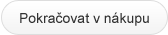
<style>
.page{position:relative;width:168px;height:35px}
.page>*{position:absolute;margin:0}
.t1{font:14px "ArialMT";color:#333333}
</style>
<div class="page">
<p class="t1" style="left:20px;top:12px;width:129px;height:14px">Pokračovat v nákupu</p>
</div>
